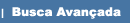
<style>
.page{position:relative;width:130px;height:23px;background:#4775a3}
.page>*{position:absolute;margin:0}
.t1{font:12px "Arial-Black";color:#ffffff}
.t2{font:10px "Arial-Black";color:#ffffff}
</style>
<div class="page">
<p class="t1" style="left:1px;top:7px;width:120px;height:12px"><span class="t2">|</span>  Busca Avançada</p>
</div>
